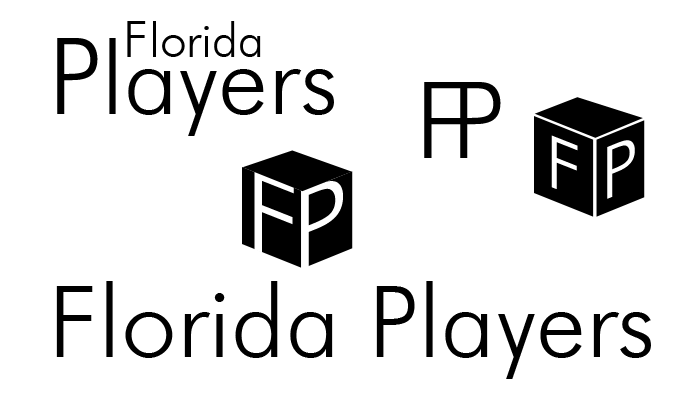
<style>
.page{position:relative;width:700px;height:400px;background:#ffffff}
.page>*{position:absolute;margin:0}
.t1{font:48px "FuturaBT-Light";color:#000000}
.t2{font:50px "FuturaBT-Light";color:#000000}
.t3{font:100px "FuturaBT-Light";color:#000000}
.t4{font:106px "FuturaBT-Light";color:#000000}
.t5{font:72px "FuturaBT-Light";color:#ffffff;scale:1.08 1}
.t6{font:110px "FuturaBT-Light";color:#ffffff;scale:1.08 1}
</style>
<div class="page">
<p class="t1" style="left:127px;top:21px;width:134px;height:36px"><span class="t2">F</span>lorida</p>
<p class="t3" style="left:57px;top:38px;width:277px;height:98px"><span class="t4">P</span>layers</p>
<p class="t4" style="left:460px;top:82px;width:41px;height:76px">P</p>
<p class="t5" style="left:551px;top:135px;width:27px;height:54px;rotate:22deg">F</p>
<p class="t5" style="left:607px;top:140px;width:28px;height:59px;rotate:-22deg">P</p>
<p class="t6" style="left:254px;top:171px;width:40px;height:82px;rotate:22deg">F</p>
<p class="t6" style="left:301px;top:181px;width:42px;height:90px;rotate:-22deg">P</p>
<p class="t3" style="left:56px;top:281px;width:595px;height:98px">Florida Players</p>
</div>
